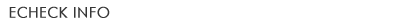
<style>
.page{position:relative;width:400px;height:24px;background:#ffffff}
.page>*{position:absolute;margin:0}
.t1{font:14.7px "FuturaBT-Light";letter-spacing:0.025em;color:#363636;text-transform:uppercase;font-weight:bold}
</style>
<div class="page">
<p class="t1" style="left:9px;top:6px;width:101px;height:12px">ECHECK INFO</p>
</div>
